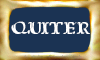
<style>
.page{position:relative;width:100px;height:60px;background:#1b3353}
.page>*{position:absolute;margin:0}
.t1{font:14px "WarsofAsgard";color:#ffffff}
</style>
<div class="page">
<p class="t1" style="left:11px;top:21px;width:79px;height:13px">quiter</p>
</div>
